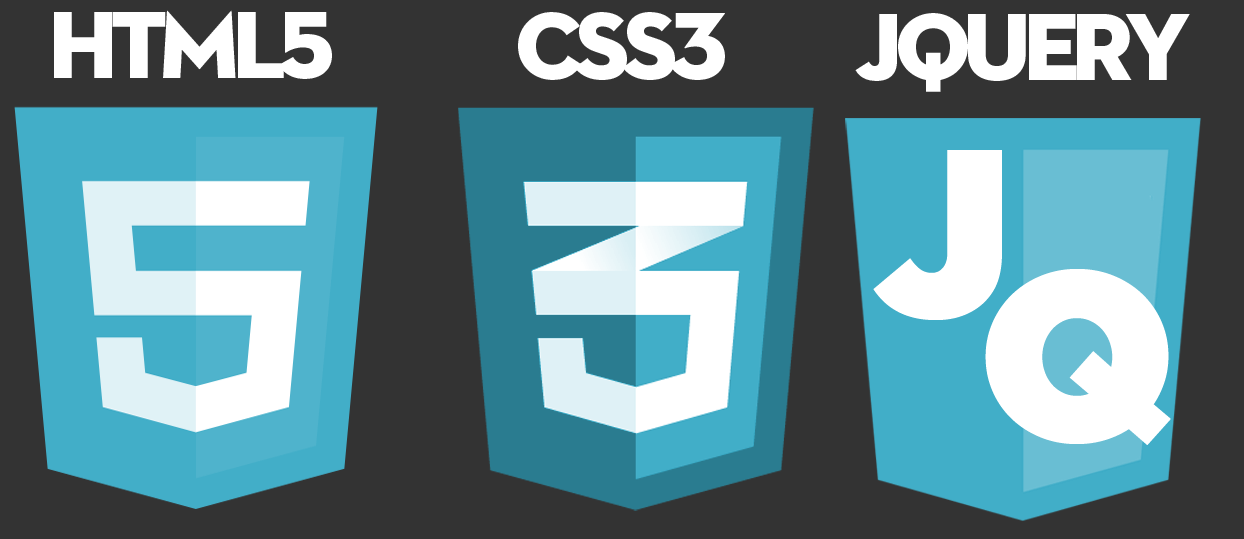
<style>
.page{position:relative;width:1244px;height:539px;background:#333333}
.page>*{position:absolute;margin:0}
.t1{font:97.2px "Neutraface2Display-Titling";letter-spacing:-0.08em;color:#ffffff}
.t2{font:239.5px "GothamUltra";letter-spacing:-0.02em;color:#ffffff}
</style>
<div class="page">
<p class="t1" style="left:54px;top:10px;width:278px;height:69px">HTML5</p>
<p class="t1" style="left:518px;top:12px;width:207px;height:68px">CSS3</p>
<p class="t1" style="left:855px;top:13px;width:335px;height:79px">JQUERY</p>
<p class="t2" style="left:873px;top:150px;width:129px;height:170px">J</p>
<p class="t2" style="left:985px;top:269px;width:186px;height:176px">Q</p>
</div>
